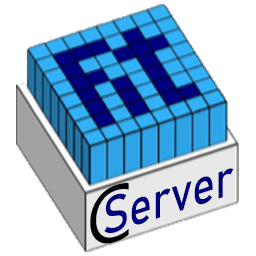
<style>
.page{position:relative;width:256px;height:256px;background:#ffffff}
.page>*{position:absolute;margin:0}
.t1{font:51.8px "Bahnschrift";color:#00007d;scale:0.88 1}
.t2{font:76.4px "MalgunGothic";color:#030303}
</style>
<div class="page">
<p class="t1" style="left:104px;top:168px;width:130px;height:65px;rotate:-18deg">Server</p>
<p class="t2" style="left:90px;top:183px;width:39px;height:61px;rotate:-17deg">C</p>
</div>
